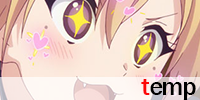
<style>
.page{position:relative;width:200px;height:100px}
.page>*{position:absolute;margin:0}
.t1{font:36px "DSNLardPhrao";color:#000000}
.t2{font:36px "DSNLardPhrao";color:#fc0707}
</style>
<div class="page">
<p class="t1" style="left:141px;top:79px;width:55px;height:21px"><span class="t2">t</span>emp</p>
</div>
